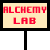
<style>
.page{position:relative;width:50px;height:50px;background:#ffffff}
.page>*{position:absolute;margin:0}
.t1{font:7.7px "8BITWONDERNominal";color:#ff0036;scale:0.76 1}
.t2{font:7.8px "8BITWONDERNominal";color:#ff0036}
</style>
<div class="page">
<p class="t1" style="left:3px;top:6px;width:44px;height:7px">ALCHEMY</p>
<p class="t2" style="left:13px;top:17px;width:23px;height:7px">LAB</p>
</div>
